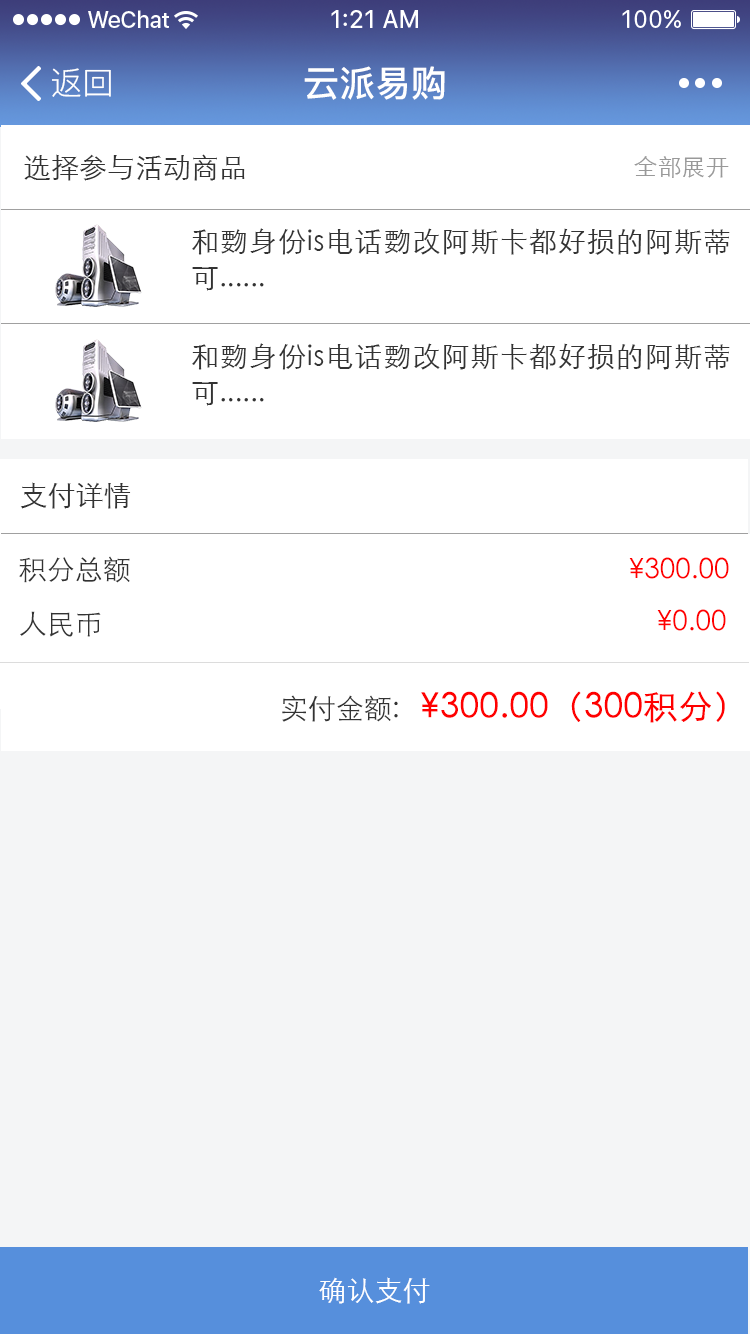
<style>
.page{position:relative;width:750px;height:1334px;background:#ffffff}
.page>*{position:absolute;margin:0}
.t1{font:32px "PingFang-SC-Regular";color:#ffffff}
.t2{font:36px "PingFang-SC-Bold";color:#ffffff}
.t3{font:28px "STXihei";color:#333333}
.t4{font:24px "STXihei";color:#999999}
.t5{font:28px/36px "STXihei";color:#333333}
.t6{font:28px "STXihei";color:#ff0000}
.t7{font:34px "STXihei";color:#ff0000;font-weight:bold}
.t8{font:28px "STXihei";color:#ffffff}
</style>
<div class="page">
<p class="t1" style="left:52px;top:68px;width:59px;height:29px">返回</p>
<p class="t2" style="left:304px;top:66px;width:141px;height:34px">云派易购</p>
<p class="t3" style="left:24px;top:154px;width:221px;height:27px">选择参与活动商品</p>
<p class="t4" style="left:634px;top:156px;width:95px;height:22px">全部展开</p>
<p class="t5" style="left:192px;top:228px;width:538px;height:63px;text-align:justify">和覅身份is电话覅改阿斯卡都好损的阿斯蒂可......</p>
<p class="t5" style="left:192px;top:343px;width:538px;height:63px;text-align:justify">和覅身份is电话覅改阿斯卡都好损的阿斯蒂可......</p>
<p class="t3" style="left:20px;top:482px;width:111px;height:27px">支付详情</p>
<p class="t3" style="left:19px;top:556px;width:111px;height:27px">积分总额</p>
<p class="t6" style="left:629px;top:557px;width:100px;height:22px">¥300.00</p>
<p class="t3" style="left:20px;top:611px;width:81px;height:26px">人民币</p>
<p class="t6" style="left:657px;top:609px;width:69px;height:22px">¥0.00</p>
<p class="t7" style="left:282px;top:691px;width:443px;height:32px"><span class="t3">实付金额:   </span>¥300.00（300积分）</p>
<p class="t8" style="left:319px;top:1277px;width:111px;height:27px">确认支付</p>
</div>
